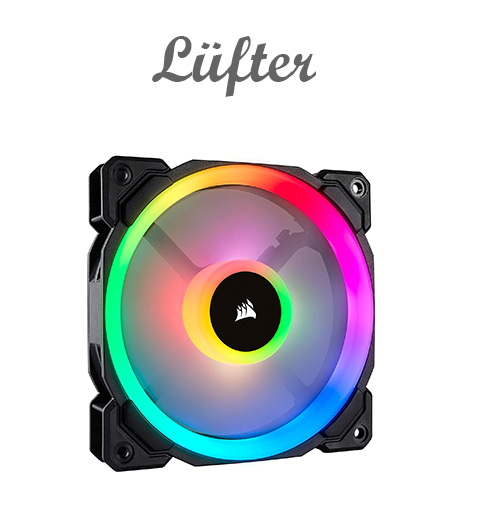
<style>
.page{position:relative;width:499px;height:526px;background:#ffffff}
.page>*{position:absolute;margin:0}
.t1{font:64px "ScriptMTBold";color:#656464}
</style>
<div class="page">
<p class="t1" style="left:152px;top:36px;width:164px;height:61px">Lüfter</p>
</div>
